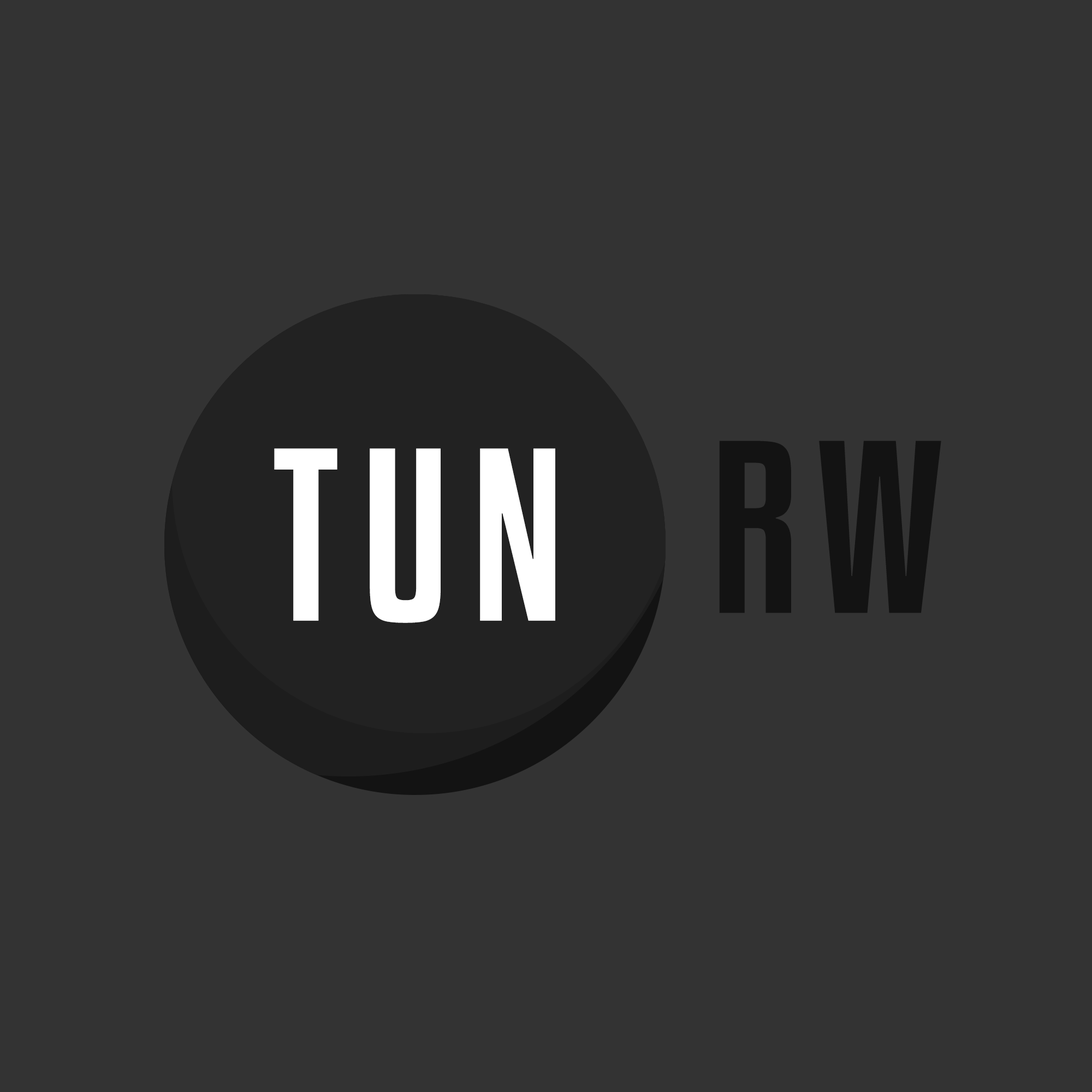
<style>
.page{position:relative;width:1092px;height:1092px;background:#333333}
.page>*{position:absolute;margin:0}
.t1{font:217.5px "KenyanCoffeeRg-Regular";letter-spacing:0.1em;color:#ffffff}
.t2{font:217.5px "KenyanCoffeeRg-Regular";letter-spacing:0.1em;color:#131313}
</style>
<div class="page">
<p class="t1" style="left:274px;top:448px;width:281px;height:175px">TUN</p>
<p class="t2" style="left:719px;top:441px;width:222px;height:172px">RW</p>
</div>
